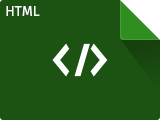
<style>
.page{position:relative;width:160px;height:120px;background:#1c5212}
.page>*{position:absolute;margin:0}
.t1{font:14px "FiraSans-Regular";color:#ffffff}
</style>
<div class="page">
<p class="t1" style="left:6px;top:6px;width:34px;height:10px">HTML</p>
</div>
